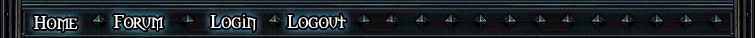
<style>
.page{position:relative;width:755px;height:38px}
.page>*{position:absolute;margin:0}
.t1{font:17px "Morpheus";color:#ffffff;scale:1.1 1}
</style>
<div class="page">
<p class="t1" style="left:34px;top:16px;width:44px;height:16px">Home</p>
<p class="t1" style="left:114px;top:15px;width:50px;height:16px">Forum</p>
<p class="t1" style="left:210px;top:14px;width:46px;height:18px">Login</p>
<p class="t1" style="left:287px;top:14px;width:59px;height:15px">Logout</p>
</div>
